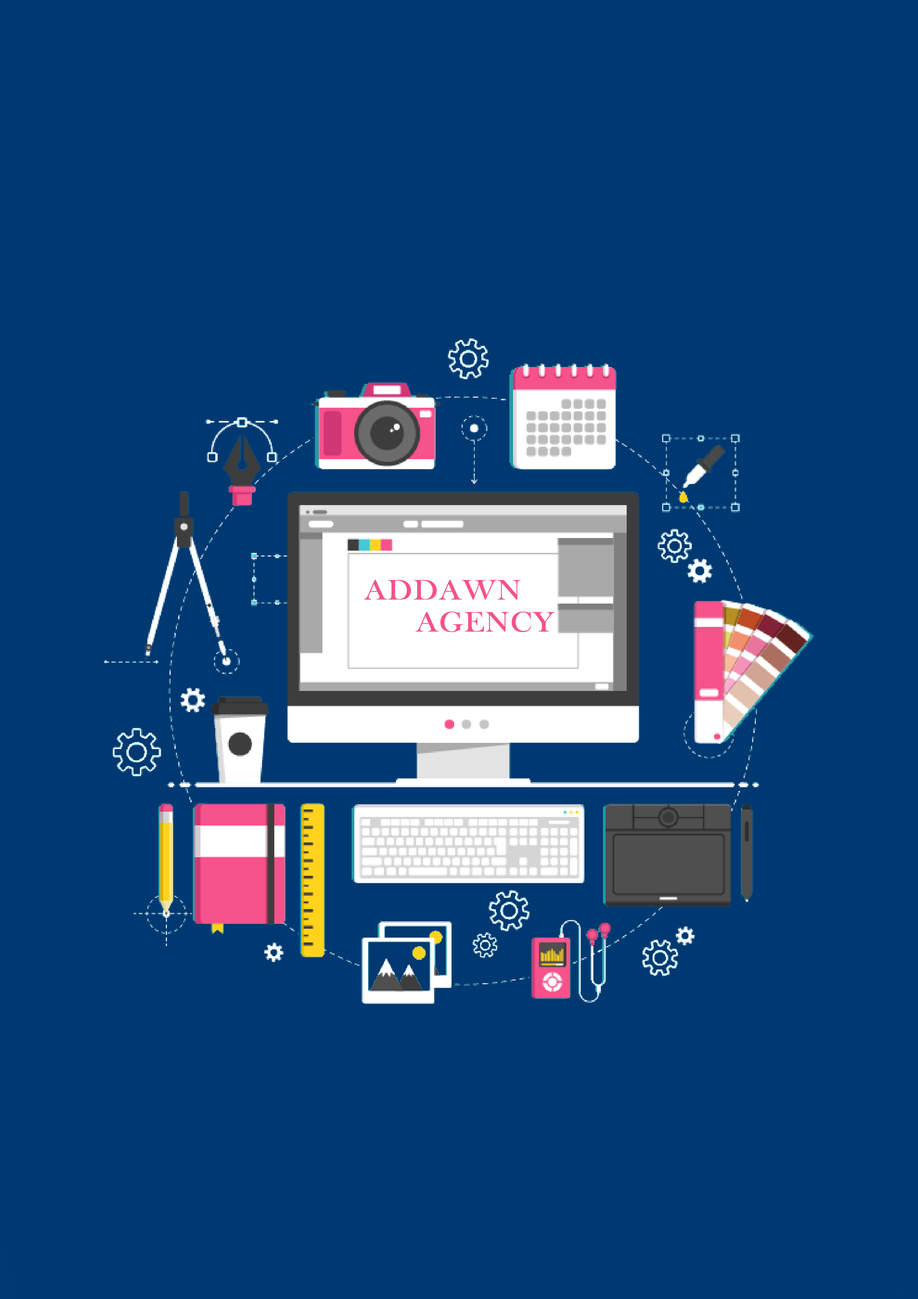
<style>
.page{position:relative;width:918px;height:1299px;background:#003871}
.page>*{position:absolute;margin:0}
.t1{font:29px "BaskOldFace";color:#f6528c;font-weight:bold;scale:1.11 1}
</style>
<div class="page">
<p class="t1" style="left:364px;top:580px;width:157px;height:20px">ADDAWN</p>
<p class="t1" style="left:415px;top:611px;width:140px;height:21px">AGENCY</p>
</div>
